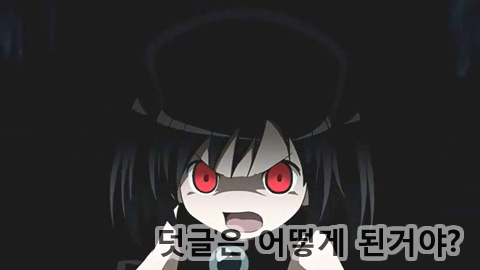
<style>
.page{position:relative;width:480px;height:270px;background:#1c1c1c}
.page>*{position:absolute;margin:0}
.t1{font:30px "MalgunGothicBold";color:#000000}
</style>
<div class="page">
<p class="t1" style="left:159px;top:228px;width:301px;height:29px;opacity:0.7">덧글은 어떻게 된거야?</p>
</div>
